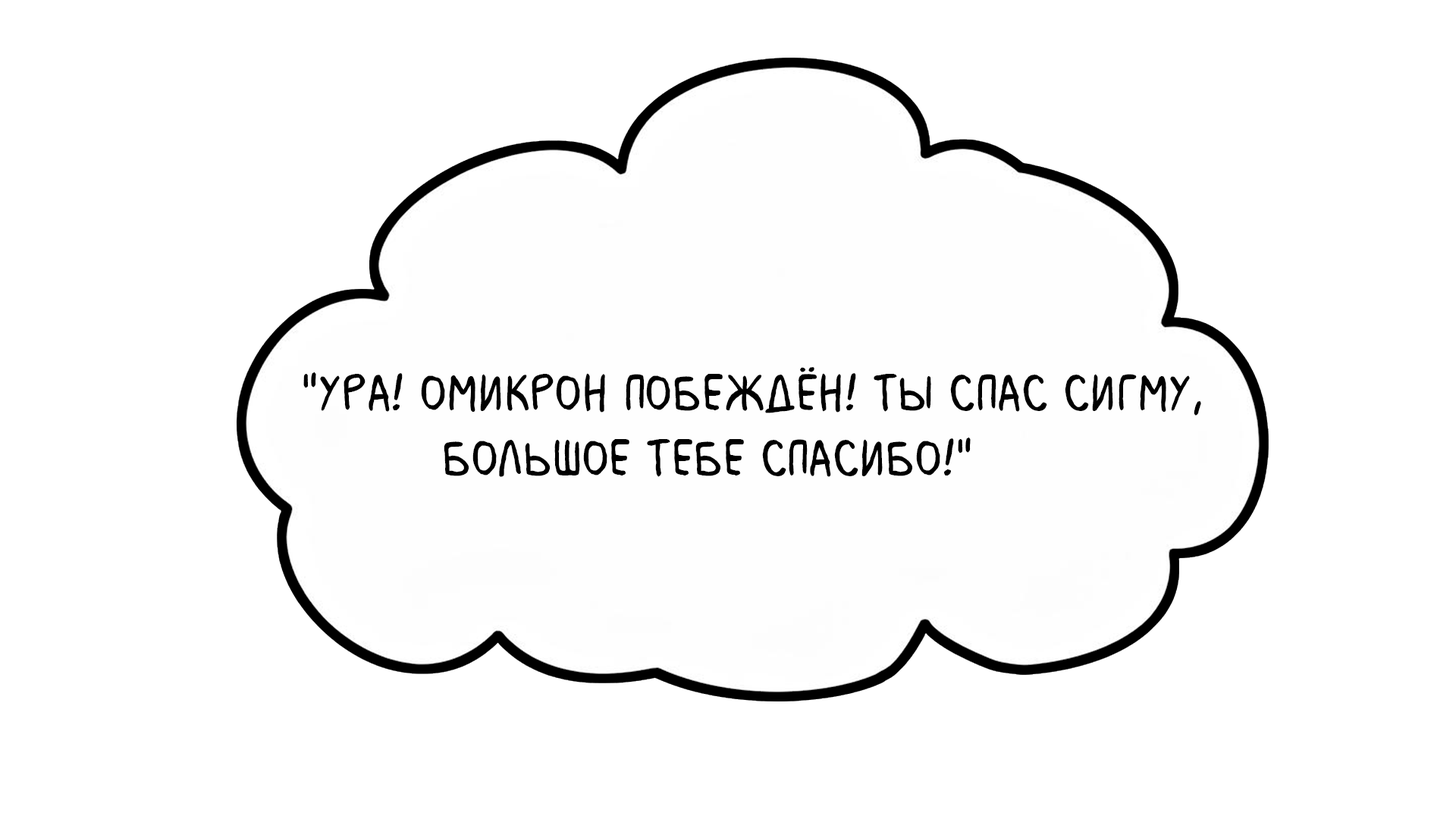
<style>
.page{position:relative;width:1456px;height:819px;background:#ffffff}
.page>*{position:absolute;margin:0}
.t1{font:54.6px "MilkMustacheBB";color:#000000}
</style>
<div class="page">
<p class="t1" style="left:303px;top:367px;width:898px;height:110px">"Ура! Омикрон побеждён! Ты спас Сигму, <br>         большое тебе спасибо!"</p>
</div>
